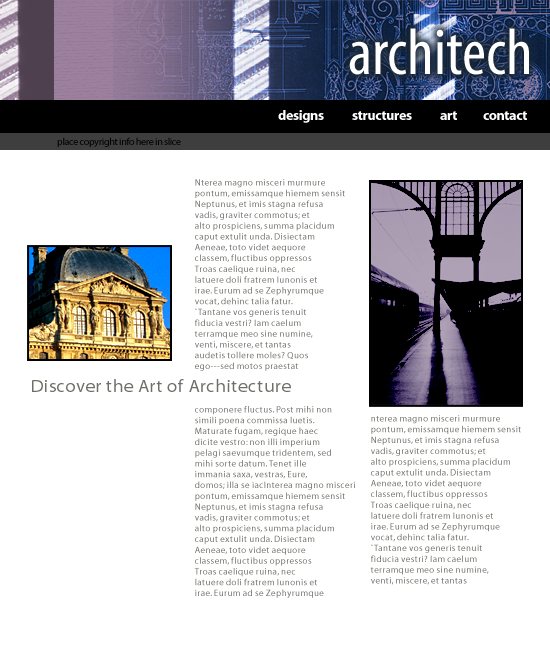
<style>
.page{position:relative;width:550px;height:660px;background:#ffffff}
.page>*{position:absolute;margin:0}
.t1{font:9px "Myriad-Roman";letter-spacing:0.05em;color:#6e6f68}
.t2{font:18px "MyriadMM";letter-spacing:0.05em;color:#6e6f68}
</style>
<div class="page">
<p class="t1" style="left:194px;top:179px;width:151px;height:192px">Nterea magno misceri murmure<br>  pontum, emissamque hiemem sensit<br>  Neptunus, et imis stagna refusa<br>  vadis, graviter commotus; et<br>  alto prospiciens, summa placidum<br>  caput extulit unda. Disiectam<br>  Aeneae, toto videt aequore<br>  classem, fluctibus oppressos<br>  Troas caelique ruina, nec<br>  latuere doli fratrem Iunonis et<br>  irae. Eurum ad se Zephyrumque<br>  vocat, dehinc talia fatur.<br>  `Tantane vos generis tenuit<br>  fiducia vestri? Iam caelum<br>  terramque meo sine numine,<br>  venti, miscere, et tantas<br>  audetis tollere moles? Quos<br>  ego---sed motos praestat</p>
<p class="t2" style="left:32px;top:379px;width:259px;height:13px">Discover the Art of Architecture</p>
<p class="t1" style="left:194px;top:406px;width:161px;height:192px">componere fluctus. Post mihi non<br>  simili poena commissa luetis.<br>  Maturate fugam, regique haec<br>  dicite vestro: non illi imperium<br>  pelagi saevumque tridentem, sed<br>  mihi sorte datum. Tenet ille<br>  immania saxa, vestras, Eure,<br>  domos; illa se iacInterea magno misceri    <br>  pontum, emissamque hiemem sensit<br>  Neptunus, et imis stagna refusa<br>  vadis, graviter commotus; et<br>  alto prospiciens, summa placidum<br>  caput extulit unda. Disiectam<br>  Aeneae, toto videt aequore<br>  classem, fluctibus oppressos<br>  Troas caelique ruina, nec<br>  latuere doli fratrem Iunonis et<br>  irae. Eurum ad se Zephyrumque<br>  vocat, dehinc talia fatur.<br>  `Tantane vos generis tenuit<br>  fiducia vestri? Iam caelum<br>  terramque meo sine numine,<br>  venti, miscere, et tantas<br>  audetis tollere moles? Quos<br>  ego---sed motos praestat<br>  componere fluctus. Post mihi non<br>  simili poena commissa luetis.<br>  Maturate fugam, regique haec<br>  dicite vestro: non illi imperium<br>  pelagi saevumque tridentem, sed<br>  mihi sorte datum. Tenet ille<br>  immania saxa, vestras, Eure,<br>  domos; illa se iac</p>
<p class="t1" style="left:370px;top:415px;width:151px;height:170px">nterea magno misceri murmure<br>  pontum, emissamque hiemem sensit<br>  Neptunus, et imis stagna refusa<br>  vadis, graviter commotus; et<br>  alto prospiciens, summa placidum<br>  caput extulit unda. Disiectam<br>  Aeneae, toto videt aequore<br>  classem, fluctibus oppressos<br>  Troas caelique ruina, nec<br>  latuere doli fratrem Iunonis et<br>  irae. Eurum ad se Zephyrumque<br>  vocat, dehinc talia fatur.<br>  `Tantane vos generis tenuit<br>  fiducia vestri? Iam caelum<br>  terramque meo sine numine,<br>  venti, miscere, et tantas</p>
</div>
